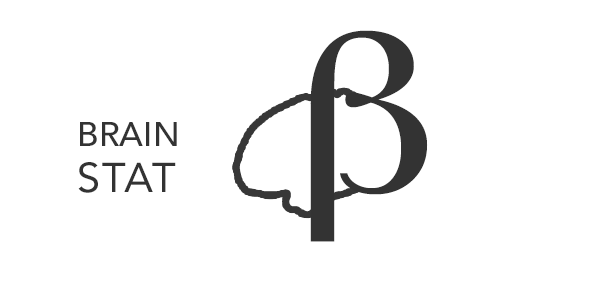
<style>
.page{position:relative;width:600px;height:300px;background:#ffffff}
.page>*{position:absolute;margin:0}
.t1{font:58.3px/41.7px "Avenir-Medium";color:#333333}
.t2{font:70.8px/41.7px "Avenir-Roman";letter-spacing:0.05em;color:#333333}
</style>
<div class="page">
<p class="t1" style="left:78px;top:122px;width:99px;height:71px">BRAIN<br><span class="t2">STAT</span></p>
</div>
